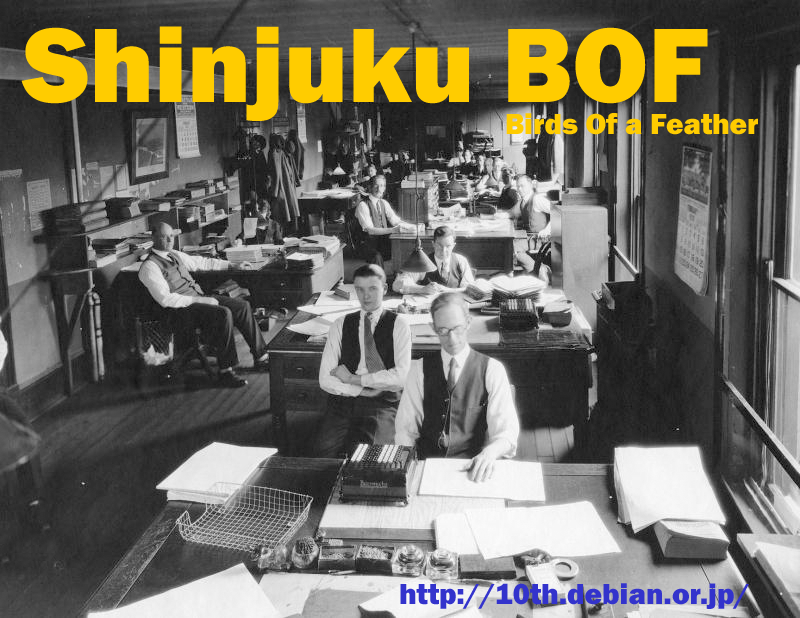
<style>
.page{position:relative;width:800px;height:618px}
.page>*{position:absolute;margin:0}
.t1{font:109.6px "FranklinGothic-Heavy";color:#ffcc00}
.t2{font:29.9px "FranklinGothic-Heavy";color:#ffcc00}
.t3{font:29.9px "FranklinGothic-Heavy";color:#3333cc}
</style>
<div class="page">
<p class="t1" style="left:21px;top:26px;width:687px;height:95px">Shinjuku BOF</p>
<p class="t2" style="left:506px;top:113px;width:252px;height:22px">Birds Of a Feather</p>
<p class="t3" style="left:400px;top:583px;width:349px;height:26px">http://10th.debian.or.jp/</p>
</div>
